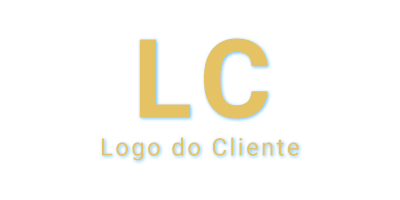
<style>
.page{position:relative;width:400px;height:200px;background:#ffffff}
.page>*{position:absolute;margin:0}
.t1{font:109.3px "Roboto-Bold";letter-spacing:0.1em;color:#e5c365}
.t2{font:23.9px "Roboto-Regular";letter-spacing:0.1em;color:#e5c365}
</style>
<div class="page">
<p class="t1" style="left:139px;top:38px;width:129px;height:81px">LC</p>
<p class="t2" style="left:102px;top:137px;width:197px;height:24px">Logo do Cliente</p>
</div>
